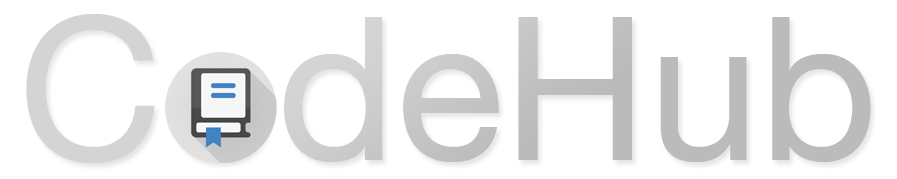
<style>
.page{position:relative;width:897px;height:179px;background:#ffffff}
.page>*{position:absolute;margin:0}
.t1{font:200px "HelveticaNeue";color:#c5c5c5}
</style>
<div class="page">
<p class="t1" style="left:26px;top:14px;width:845px;height:149px">CodeHub</p>
</div>
